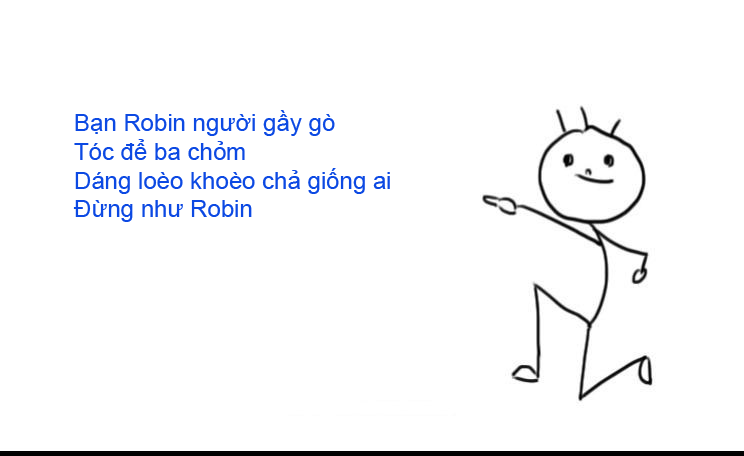
<style>
.page{position:relative;width:744px;height:456px;background:#ffffff}
.page>*{position:absolute;margin:0}
.t1{font:24px "ArialMT";color:#0c49e3}
</style>
<div class="page">
<p class="t1" style="left:73px;top:110px;width:317px;height:112px">Bạn Robin người gầy gò<br>Tóc để ba chỏm<br>Dáng loèo khoèo chả giống ai<br>Đừng như Robin</p>
</div>
